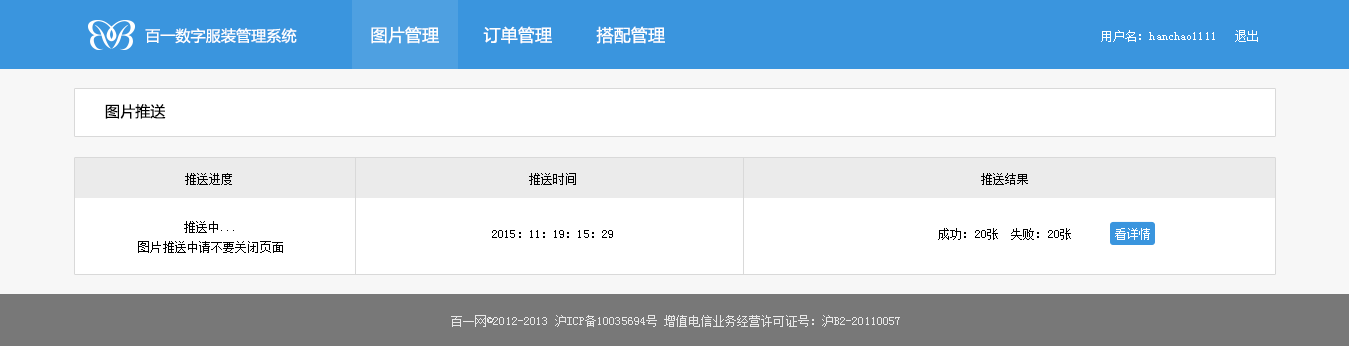
<style>
.page{position:relative;width:1349px;height:346px;background:#ffffff}
.page>*{position:absolute;margin:0}
.t1{font:15px "MicrosoftYaHei";letter-spacing:0.01em;color:#ffffff}
.t2{font:17px "MicrosoftYaHei";letter-spacing:0.01em;color:#ffffff}
.t3{font:12px "SimSun";letter-spacing:0.01em;color:#ffffff}
.t4{font:15px "MicrosoftYaHei";letter-spacing:0.01em;color:#000000}
.t5{font:12px "SimSun";letter-spacing:0.01em;color:#000000}
.t6{font:12px/20px "SimSun";letter-spacing:0.01em;color:#000000}
.t7{font:12px "SimSun";letter-spacing:0.01em;color:#e8e8e8}
</style>
<div class="page">
<p class="t1" style="left:145px;top:28px;width:152px;height:16px">百一数字服装管理系统</p>
<p class="t2" style="left:371px;top:26px;width:68px;height:18px">图片管理</p>
<p class="t2" style="left:483px;top:26px;width:69px;height:18px">订单管理</p>
<p class="t2" style="left:596px;top:26px;width:69px;height:18px">搭配管理</p>
<p class="t3" style="left:1101px;top:30px;width:114px;height:12px">用户名：hanchao1111</p>
<p class="t3" style="left:1235px;top:30px;width:23px;height:12px">退出</p>
<p class="t4" style="left:105px;top:104px;width:61px;height:15px">图片推送</p>
<p class="t5" style="left:185px;top:173px;width:47px;height:12px">推送进度</p>
<p class="t5" style="left:529px;top:173px;width:47px;height:12px">推送时间</p>
<p class="t5" style="left:981px;top:173px;width:47px;height:12px">推送结果</p>
<p class="t6" style="left:138px;top:221px;width:145px;height:32px;text-align:center">推送中...<br>图片推送中请不要关闭页面</p>
<p class="t5" style="left:492px;top:230px;width:121px;height:8px">2015：11：19：15：29</p>
<p class="t5" style="left:938px;top:228px;width:133px;height:12px">成功：20张  失败：20张</p>
<p class="t3" style="left:1115px;top:228px;width:35px;height:12px">看详情</p>
<p class="t7" style="left:451px;top:315px;width:449px;height:12px">百一网©2012-2013 沪ICP备10035694号 增值电信业务经营许可证号：沪B2-20110057</p>
</div>
